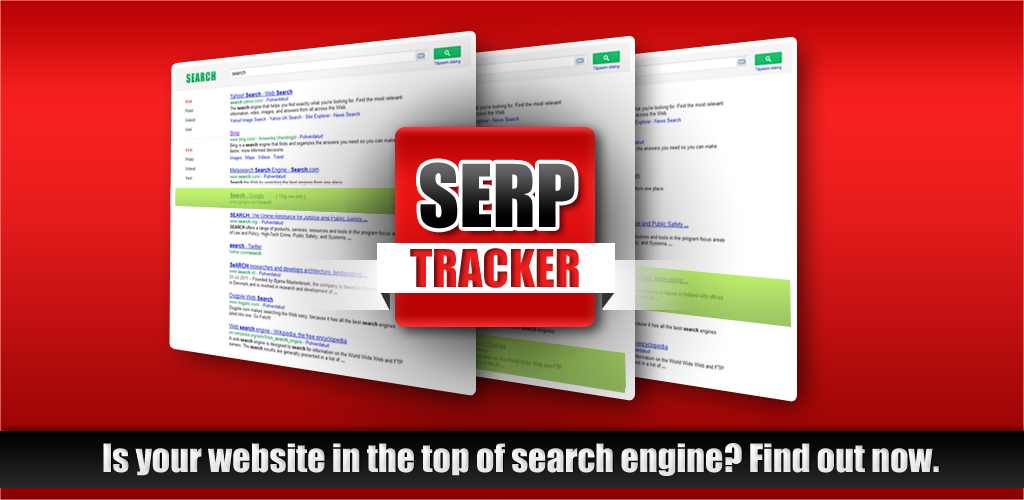
<style>
.page{position:relative;width:1024px;height:500px}
.page>*{position:absolute;margin:0}
.t1{font:80px "Impact"}
.t2{font:48px "Impact"}
.t3{font:36px "Impact";color:#ffffff}
</style>
<div class="page">
<p class="t1" style="left:420px;top:162px;width:155px;height:67px">SERP</p>
<p class="t2" style="left:410px;top:248px;width:169px;height:40px">TRACKER</p>
<p class="t3" style="left:103px;top:443px;width:836px;height:33px">Is your website in the top of search engine? Find out now.</p>
</div>
